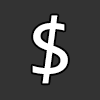
<style>
.page{position:relative;width:100px;height:100px;background:#333333}
.page>*{position:absolute;margin:0}
.t1{font:80px "Consolas";color:#ffffff;text-transform:uppercase}
</style>
<div class="page">
<p class="t1" style="left:32px;top:15px;width:36px;height:69px">$</p>
</div>
